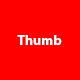
<style>
.page{position:relative;width:80px;height:80px;background:#ff0000}
.page>*{position:absolute;margin:0}
.t1{font:14px "MyriadPro-Bold";color:#ffffff}
</style>
<div class="page">
<p class="t1" style="left:17px;top:35px;width:45px;height:10px">Thumb</p>
</div>
